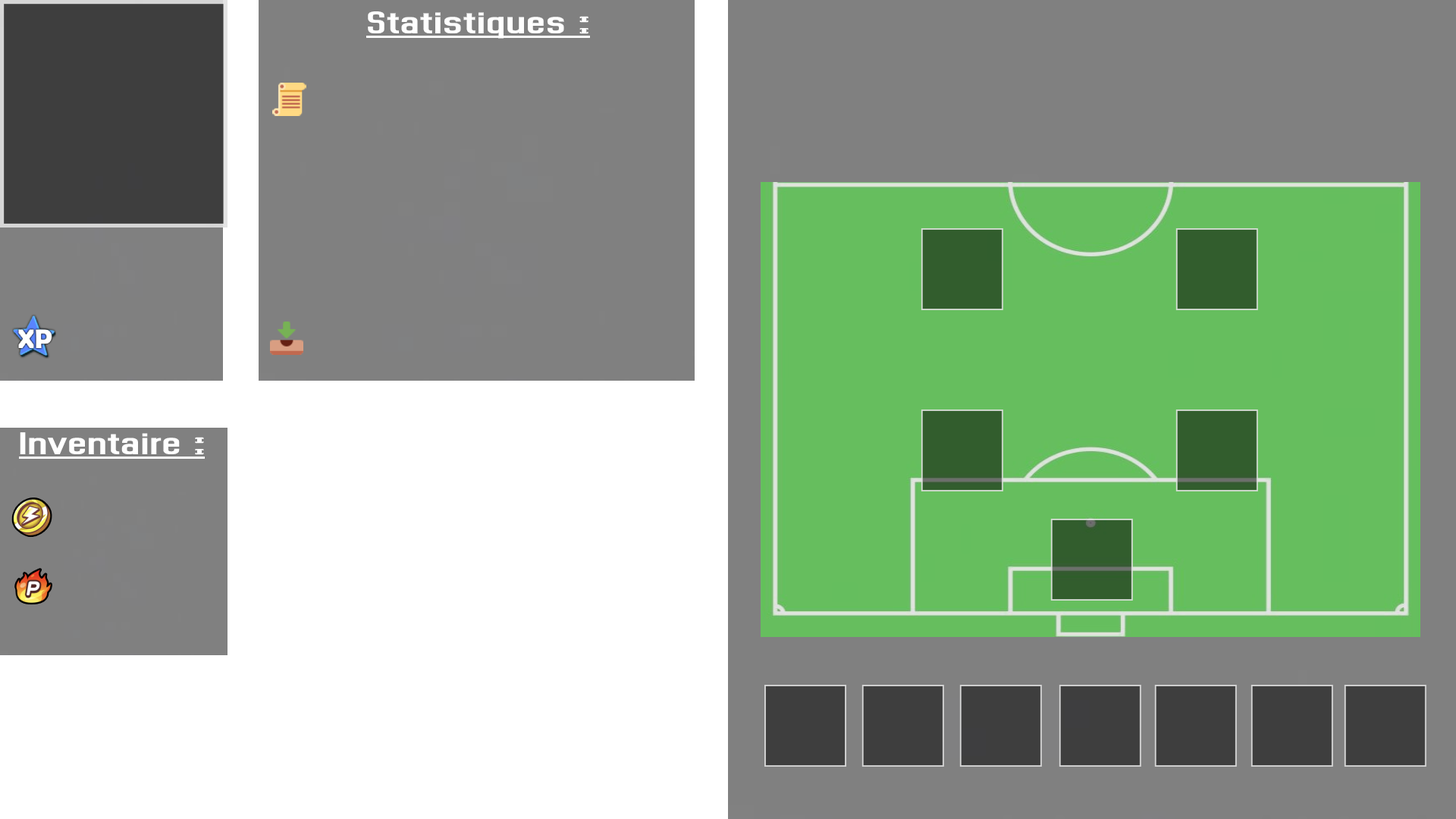
<style>
.page{position:relative;width:1456px;height:819px;background:#808080}
.page>*{position:absolute;margin:0}
.t1{font:45.5px "Dhurjati";color:#ffffff}
</style>
<div class="page">
<p class="t1" style="left:368px;top:11px;width:220px;height:28px">Statistiques :</p>
<p class="t1" style="left:20px;top:432px;width:184px;height:23px">Inventaire :</p>
</div>
